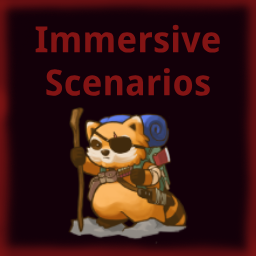
<style>
.page{position:relative;width:256px;height:256px;background:#130009}
.page>*{position:absolute;margin:0}
.t1{font:36px "DroidSans-Bold";color:#831414}
</style>
<div class="page">
<p class="t1" style="left:35px;top:24px;width:185px;height:72px;text-align:center">Immersive<br>Scenarios</p>
</div>
